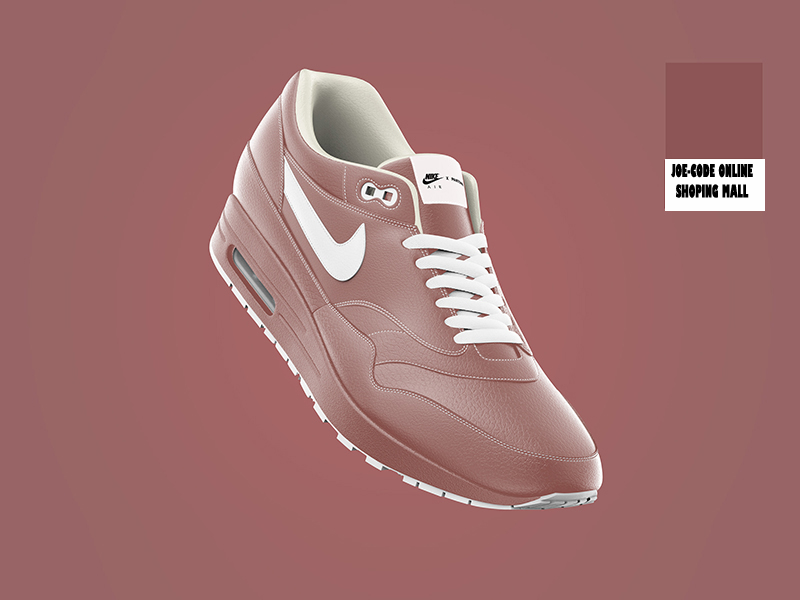
<style>
.page{position:relative;width:800px;height:600px}
.page>*{position:absolute;margin:0}
.t1{font:17.1px "GillSans-UltraBoldCondensed";color:#000000;scale:0.65 1}
</style>
<div class="page">
<p class="t1" style="left:671px;top:163px;width:82px;height:35px;text-align:center">JOE-CODE ONLINE <br>SHOPING MALL</p>
</div>
